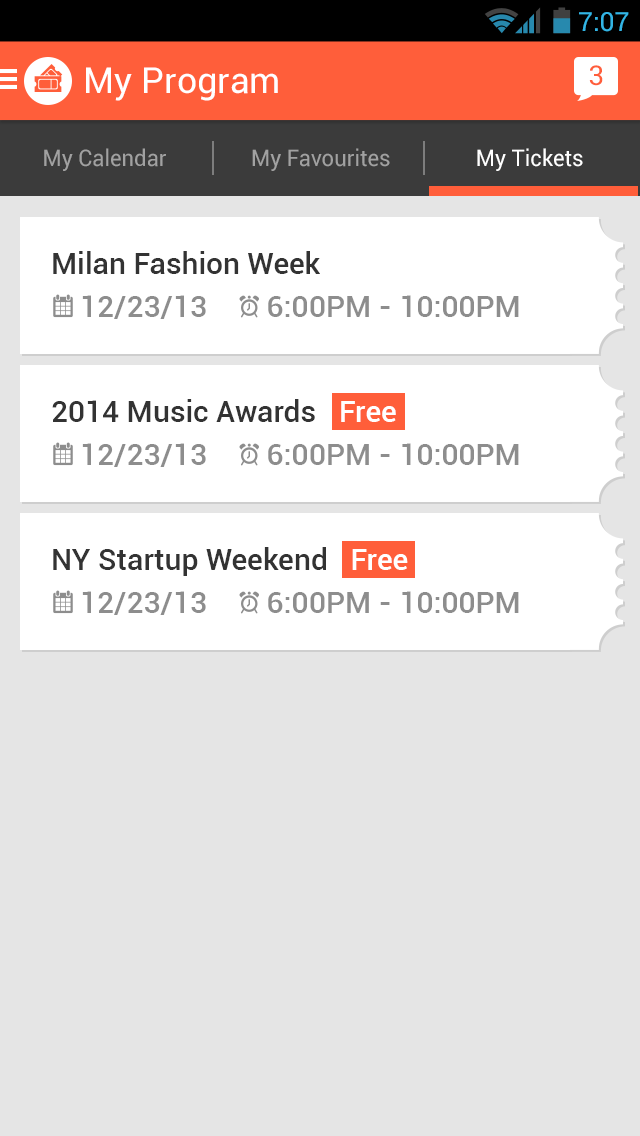
<style>
.page{position:relative;width:640px;height:1136px;background:#e5e5e5}
.page>*{position:absolute;margin:0}
.t1{font:26.6px "Roboto-Regular";color:#33b5e5}
.t2{font:27.4px "Roboto-Regular";color:#ff5e3a}
.t3{font:35.8px "Roboto-Regular";color:#ffffff}
.t4{font:23px "Roboto-Regular";color:#a1a1a1;scale:0.96 1}
.t5{font:23px "Roboto-Regular";color:#ffffff;scale:0.96 1}
.t6{font:30px "Roboto-Medium";color:#333333}
.t7{font:30px "Roboto-Medium";color:#8d8d8d}
.t8{font:30px "Roboto-Medium";color:#ffffff}
</style>
<div class="page">
<p class="t1" style="left:579px;top:12px;width:50px;height:20px">7:07</p>
<p class="t2" style="left:589px;top:65px;width:14px;height:21px">3</p>
<p class="t3" style="left:86px;top:67px;width:192px;height:34px">My Program</p>
<p class="t4" style="left:44px;top:148px;width:122px;height:23px">My Calendar</p>
<p class="t4" style="left:252px;top:148px;width:138px;height:23px">My Favourites</p>
<p class="t5" style="left:477px;top:148px;width:106px;height:23px"><span class="t4"> </span>My Tickets</p>
<p class="t6" style="left:53px;top:251px;width:267px;height:23px">Milan Fashion Week</p>
<p class="t7" style="left:82px;top:295px;width:437px;height:24px">12/23/13        6:00PM - 10:00PM</p>
<p class="t6" style="left:52px;top:399px;width:344px;height:23px">2014 Music Awards<span class="t8"> Free</span></p>
<p class="t7" style="left:82px;top:443px;width:437px;height:24px">12/23/13        6:00PM - 10:00PM</p>
<p class="t6" style="left:53px;top:547px;width:355px;height:29px">NY Startup Weekend  <span class="t8"> Free</span></p>
<p class="t7" style="left:82px;top:591px;width:437px;height:24px">12/23/13        6:00PM - 10:00PM</p>
</div>
